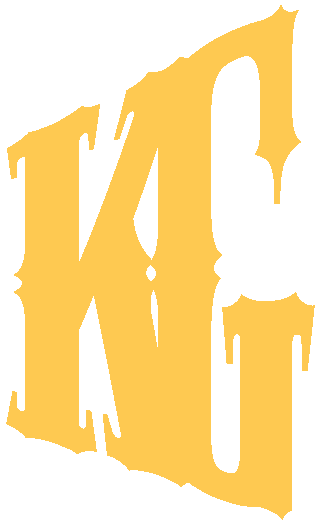
<style>
.page{position:relative;width:324px;height:524px;background:#ffffff}
.page>*{position:absolute;margin:0}
.t1{font:560.5px "MesquiteStd";letter-spacing:-0.07em;color:#fec951;scale:1.12 1}
</style>
<div class="page">
<p class="t1" style="left:6px;top:5px;width:309px;height:515px">KG</p>
</div>
